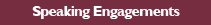
<style>
.page{position:relative;width:211px;height:25px;background:#762d40}
.page>*{position:absolute;margin:0}
.t1{font:15px "GillSans-Bold";letter-spacing:-0.05em;color:#ffffff}
</style>
<div class="page">
<p class="t1" style="left:32px;top:6px;width:148px;height:13px">Speaking Engagements</p>
</div>
